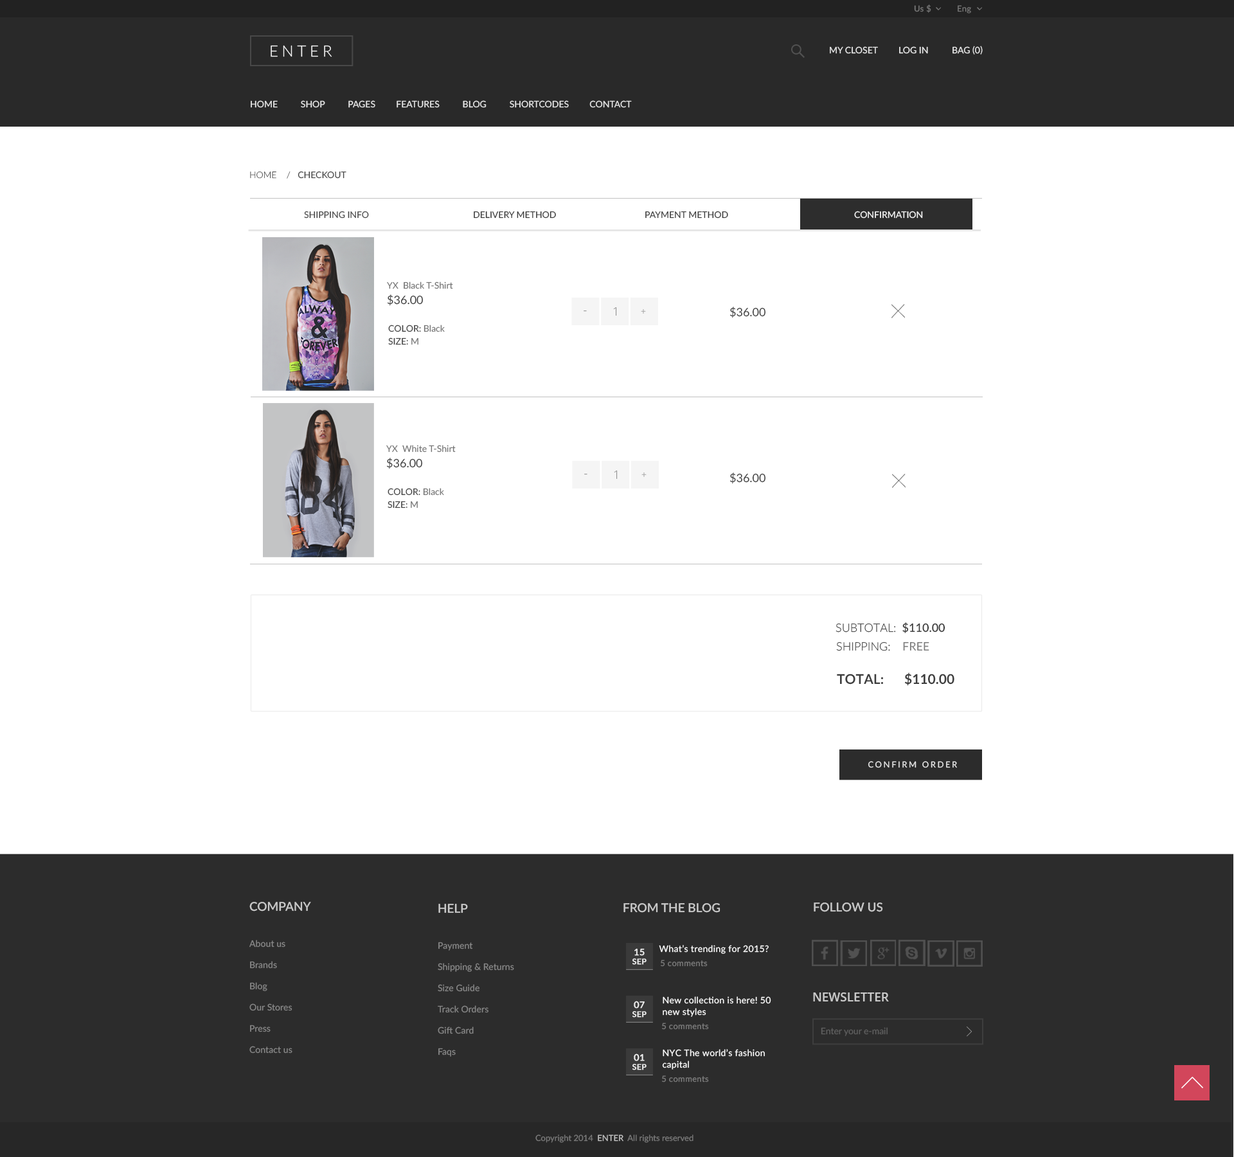
<style>
.page{position:relative;width:1234px;height:1157px;background:#ffffff}
.page>*{position:absolute;margin:0}
.t1{font:8.4px "Lato-Medium";letter-spacing:0.025em;color:#777777}
.t2{font:8.4px "Lato-Regular";letter-spacing:0.025em;color:#777777}
.t3{font:15.4px "Lato-Light";letter-spacing:0.24em;color:#f8f8f8;text-transform:uppercase}
.t4{font:9px "Lato-Regular";color:#e7e7e7}
.t5{font:9px "Lato-Regular";color:#e7e7e7;text-transform:uppercase}
.t6{font:9px "Lato-Light";color:#474747}
.t7{font:9px "Lato-Regular";color:#474747}
.t8{font:9px "Lato-Regular";color:#f2f2f2}
.t9{font:9px/15.4px "Lato-Regular";color:#747474}
.t10{font:11.6px/15.4px "Lato-Regular";color:#414141}
.t11{font:11.6px "Lato-Light";letter-spacing:0.026em;color:#929292}
.t12{font:11.6px "OpenSans-Light";color:#929292}
.t13{font:9px "Lato-Light";letter-spacing:0.026em;color:#929292}
.t14{font:11.6px "Lato-Regular";color:#414141}
.t15{font:9px/12.9px "Lato-Regular";color:#414141}
.t16{font:9px/12.9px "Lato-Regular";color:#747474}
.t17{font:11.6px "Lato-Light";color:#3e3e3e}
.t18{font:11.6px "Lato-Semibold";color:#3e3e3e}
.t19{font:11.6px "Lato-Regular";color:#7c7c7c}
.t20{font:13.5px "Lato-Bold";color:#3e3e3e}
.t21{font:8.4px "Lato-Regular";letter-spacing:0.2em;color:#eaeaea;text-transform:uppercase}
.t22{font:12.2px "Lato-Semibold";color:#c9c9c9;text-transform:uppercase}
.t23{font:9px/21.2px "Lato-Regular";letter-spacing:0.006em;color:#878787}
.t24{font:7.7px/9px "Lato-Regular";letter-spacing:0.026em;color:#f1f1f1;font-weight:bold}
.t25{font:9px/9px "Lato-Regular";letter-spacing:0.026em;color:#f1f1f1;font-weight:bold}
.t26{font:9px "Lato-Regular";letter-spacing:0.025em;color:#fbfbfb}
.t27{font:8.4px "Lato-Regular";letter-spacing:0.026em;color:#7e7e7e}
.t28{font:9px/11.6px "Lato-Regular";letter-spacing:0.026em;color:#fbfbfb}
.t29{font:12.2px "OpenSans-Semibold";color:#c9c9c9;text-transform:uppercase}
.t30{font:9px "Lato-Regular";color:#5f5f5f}
.t31{font:8.4px "Lato-Regular";color:#7b7b7b}
.t32{font:8.4px "Lato-Regular";color:#c5c5c5}
</style>
<div class="page">
<p class="t1" style="left:914px;top:4px;width:18px;height:9px">Us $</p>
<p class="t2" style="left:958px;top:5px;width:13px;height:9px">Eng</p>
<p class="t3" style="left:271px;top:45px;width:61px;height:12px">ENTER</p>
<p class="t4" style="left:830px;top:46px;width:48px;height:8px">MY CLOSET</p>
<p class="t4" style="left:899px;top:46px;width:29px;height:8px">LOG IN</p>
<p class="t5" style="left:953px;top:46px;width:30px;height:9px">BAG (0)</p>
<p class="t5" style="left:251px;top:100px;width:381px;height:8px">Home          Shop          Pages         Features          Blog          Shortcodes         Contact</p>
<p class="t6" style="left:250px;top:171px;width:96px;height:8px">HOME    /   <span class="t7">CHECKOUT</span></p>
<p class="t7" style="left:304px;top:211px;width:65px;height:8px">SHIPPING INFO</p>
<p class="t7" style="left:474px;top:211px;width:82px;height:8px">DELIVERY METHOD</p>
<p class="t7" style="left:645px;top:211px;width:83px;height:8px">PAYMENT METHOD</p>
<p class="t8" style="left:854px;top:211px;width:69px;height:8px">CONFIRMATION</p>
<p class="t9" style="left:387px;top:282px;width:66px;height:24px">YX  Black T-Shirt<br><span class="t10">$36.00</span></p>
<p class="t11" style="left:584px;top:310px;width:3px;height:2px">-</p>
<p class="t12" style="left:613px;top:307px;width:4px;height:9px">1</p>
<p class="t13" style="left:641px;top:309px;width:5px;height:5px">+</p>
<p class="t14" style="left:730px;top:307px;width:36px;height:11px">$36.00</p>
<p class="t15" style="left:388px;top:325px;width:57px;height:20px">COLOR: <span class="t16">Black<br></span>SIZE: <span class="t16">M</span></p>
<p class="t9" style="left:386px;top:445px;width:70px;height:24px">YX  White T-Shirt<br><span class="t10">$36.00</span></p>
<p class="t11" style="left:584px;top:474px;width:4px;height:1px">-</p>
<p class="t12" style="left:614px;top:471px;width:4px;height:8px">1</p>
<p class="t13" style="left:642px;top:473px;width:5px;height:4px">+</p>
<p class="t14" style="left:730px;top:473px;width:36px;height:11px">$36.00</p>
<p class="t15" style="left:388px;top:488px;width:56px;height:21px">COLOR: <span class="t16">Black<br></span>SIZE: <span class="t16">M</span></p>
<p class="t17" style="left:836px;top:622px;width:110px;height:11px">SUBTOTAL:  <span class="t18">$110.00</span></p>
<p class="t17" style="left:836px;top:642px;width:94px;height:9px">SHIPPING:    <span class="t19">FREE</span></p>
<p class="t20" style="left:837px;top:672px;width:118px;height:14px">TOTAL:      $110.00</p>
<p class="t21" style="left:868px;top:761px;width:89px;height:7px">CONFIRM ORDER</p>
<p class="t22" style="left:249px;top:902px;width:62px;height:10px">company</p>
<p class="t22" style="left:438px;top:904px;width:30px;height:10px">HELP</p>
<p class="t22" style="left:624px;top:903px;width:97px;height:10px">FROM THE BLOG</p>
<p class="t22" style="left:814px;top:903px;width:69px;height:9px">FolLOW US</p>
<p class="t23" style="left:249px;top:940px;width:43px;height:114px">About us<br>Brands<br>Blog<br>Our Stores<br>Press<br>Contact us</p>
<p class="t23" style="left:438px;top:942px;width:76px;height:115px">Payment<br>Shipping &amp; Returns<br>Size Guide<br>Track Orders<br>Gift Card<br>Faqs</p>
<p class="t24" style="left:633px;top:948px;width:14px;height:17px;text-align:center"><span class="t25">15<br></span>SEP</p>
<p class="t26" style="left:659px;top:945px;width:110px;height:9px">What’s trending for 2015?</p>
<p class="t27" style="left:661px;top:960px;width:47px;height:7px">5 comments</p>
<p class="t24" style="left:633px;top:1001px;width:14px;height:17px;text-align:center"><span class="t25">07<br></span>SEP</p>
<p class="t28" style="left:663px;top:996px;width:108px;height:21px">New collection is here! 50 new styles</p>
<p class="t29" style="left:813px;top:993px;width:76px;height:9px">NEWSLETTER</p>
<p class="t27" style="left:662px;top:1023px;width:47px;height:7px">5 comments</p>
<p class="t30" style="left:821px;top:1027px;width:67px;height:9px">Enter your e-mail</p>
<p class="t28" style="left:662px;top:1049px;width:103px;height:21px">NYC The world’s fashion capital</p>
<p class="t24" style="left:633px;top:1054px;width:14px;height:16px;text-align:center"><span class="t25">01<br></span>SEP</p>
<p class="t27" style="left:662px;top:1076px;width:47px;height:7px">5 comments</p>
<p class="t31" style="left:536px;top:1135px;width:158px;height:8px">Copyright 2014  <span class="t32">ENTER</span>  All rights reserved</p>
</div>
